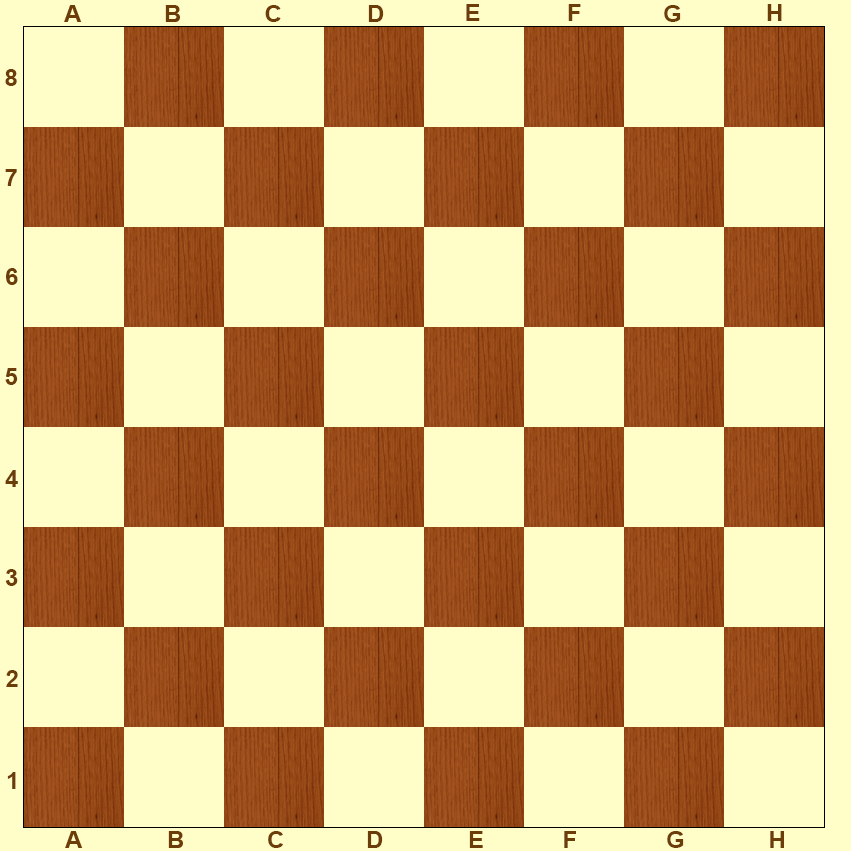
<style>
.page{position:relative;width:851px;height:851px;background:#fffec8}
.page>*{position:absolute;margin:0}
.t1{font:24px "Arial-BoldMT";color:#6d3d09}
</style>
<div class="page">
<p class="t1" style="left:265px;top:5px;width:16px;height:17px">C</p>
<p class="t1" style="left:368px;top:5px;width:16px;height:17px">D</p>
<p class="t1" style="left:466px;top:4px;width:14px;height:17px">E</p>
<p class="t1" style="left:568px;top:4px;width:13px;height:17px">F</p>
<p class="t1" style="left:664px;top:5px;width:17px;height:17px">G</p>
<p class="t1" style="left:767px;top:4px;width:15px;height:17px">H</p>
<p class="t1" style="left:5px;top:69px;width:12px;height:17px">8</p>
<p class="t1" style="left:5px;top:169px;width:12px;height:17px">7</p>
<p class="t1" style="left:6px;top:268px;width:12px;height:17px">6</p>
<p class="t1" style="left:5px;top:368px;width:13px;height:17px">5</p>
<p class="t1" style="left:5px;top:470px;width:13px;height:17px">4</p>
<p class="t1" style="left:5px;top:569px;width:13px;height:17px">3</p>
<p class="t1" style="left:6px;top:670px;width:12px;height:17px">2</p>
<p class="t1" style="left:7px;top:772px;width:9px;height:17px">1</p>
<p class="t1" style="left:268px;top:831px;width:15px;height:17px">C</p>
<p class="t1" style="left:367px;top:831px;width:16px;height:17px">D</p>
<p class="t1" style="left:469px;top:831px;width:14px;height:17px">E</p>
<p class="t1" style="left:564px;top:831px;width:12px;height:17px">F</p>
<p class="t1" style="left:667px;top:831px;width:17px;height:17px">G</p>
<p class="t1" style="left:770px;top:831px;width:14px;height:17px">H</p>
</div>
